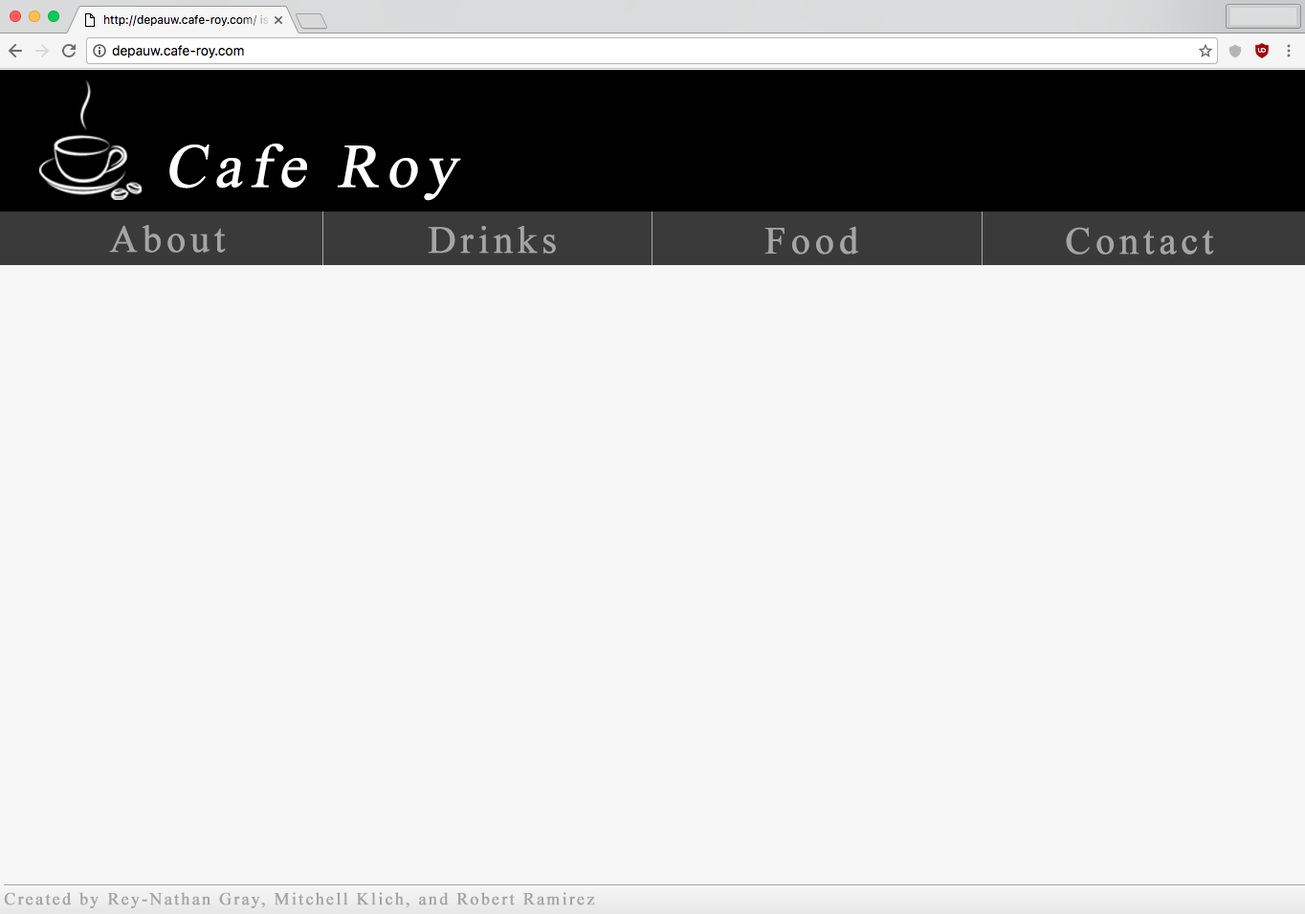
<style>
.page{position:relative;width:1305px;height:914px;background:#f7f7f7}
.page>*{position:absolute;margin:0}
.t1{font:61.7px "TimesNewRomanPSMT";letter-spacing:0.1em;color:#ffffff;font-weight:bold;font-style:italic}
.t2{font:38.3px "TimesNewRomanPSMT";letter-spacing:0.1em;color:#a5a5a5;font-weight:bold}
.t3{font:17.2px "TimesNewRomanPSMT";letter-spacing:0.1em;color:#a5a5a5;font-weight:bold}
</style>
<div class="page">
<p class="t1" style="left:169px;top:144px;width:292px;height:57px">Cafe Roy</p>
<p class="t2" style="left:109px;top:225px;width:117px;height:28px">About</p>
<p class="t2" style="left:428px;top:226px;width:128px;height:28px">Drinks</p>
<p class="t2" style="left:764px;top:226px;width:95px;height:29px">Food</p>
<p class="t2" style="left:1066px;top:227px;width:148px;height:28px">Contact</p>
<p class="t3" style="left:4px;top:892px;width:591px;height:16px">Created by Rey-Nathan Gray, Mitchell Klich, and Robert Ramirez</p>
</div>
